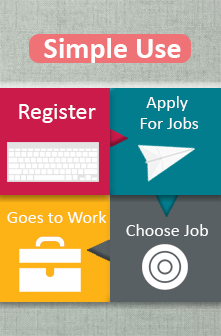
<style>
.page{position:relative;width:221px;height:336px}
.page>*{position:absolute;margin:0}
.t1{font:18px "Calibri";color:#fefefe}
.t2{font:24px "Calibri";color:#fefefe}
</style>
<div class="page">
<p class="t1" style="left:140px;top:96px;width:59px;height:33px;text-align:center">Apply <br>For Jobs</p>
<p class="t2" style="left:19px;top:104px;width:77px;height:19px">Register</p>
<p class="t1" style="left:7px;top:211px;width:100px;height:12px">Goes to Work</p>
<p class="t1" style="left:126px;top:224px;width:82px;height:12px">Choose Job</p>
</div>
